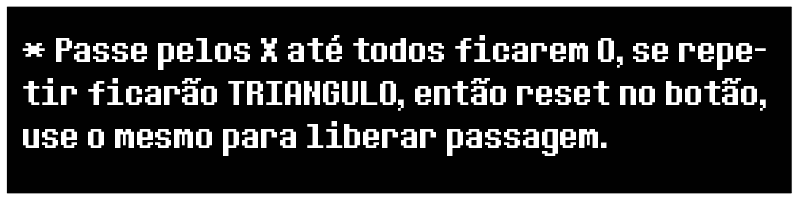
<style>
.page{position:relative;width:800px;height:200px;background:#010101}
.page>*{position:absolute;margin:0}
.t1{font:36px "DeterminationSans";color:#ffffff}
</style>
<div class="page">
<p class="t1" style="left:22px;top:35px;width:744px;height:121px">* Passe pelos X até todos ficarem O, se repetir ficarão TRIANGULO, então reset no botão, use o mesmo para liberar passagem.</p>
</div>
